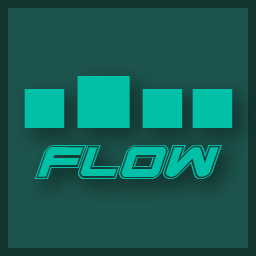
<style>
.page{position:relative;width:256px;height:256px;background:#1c534c}
.page>*{position:absolute;margin:0}
.t1{font:67.6px "SpaceRangerAcademyItalic";color:#00c0a7}
</style>
<div class="page">
<p class="t1" style="left:34px;top:145px;width:188px;height:34px">flow</p>
</div>
